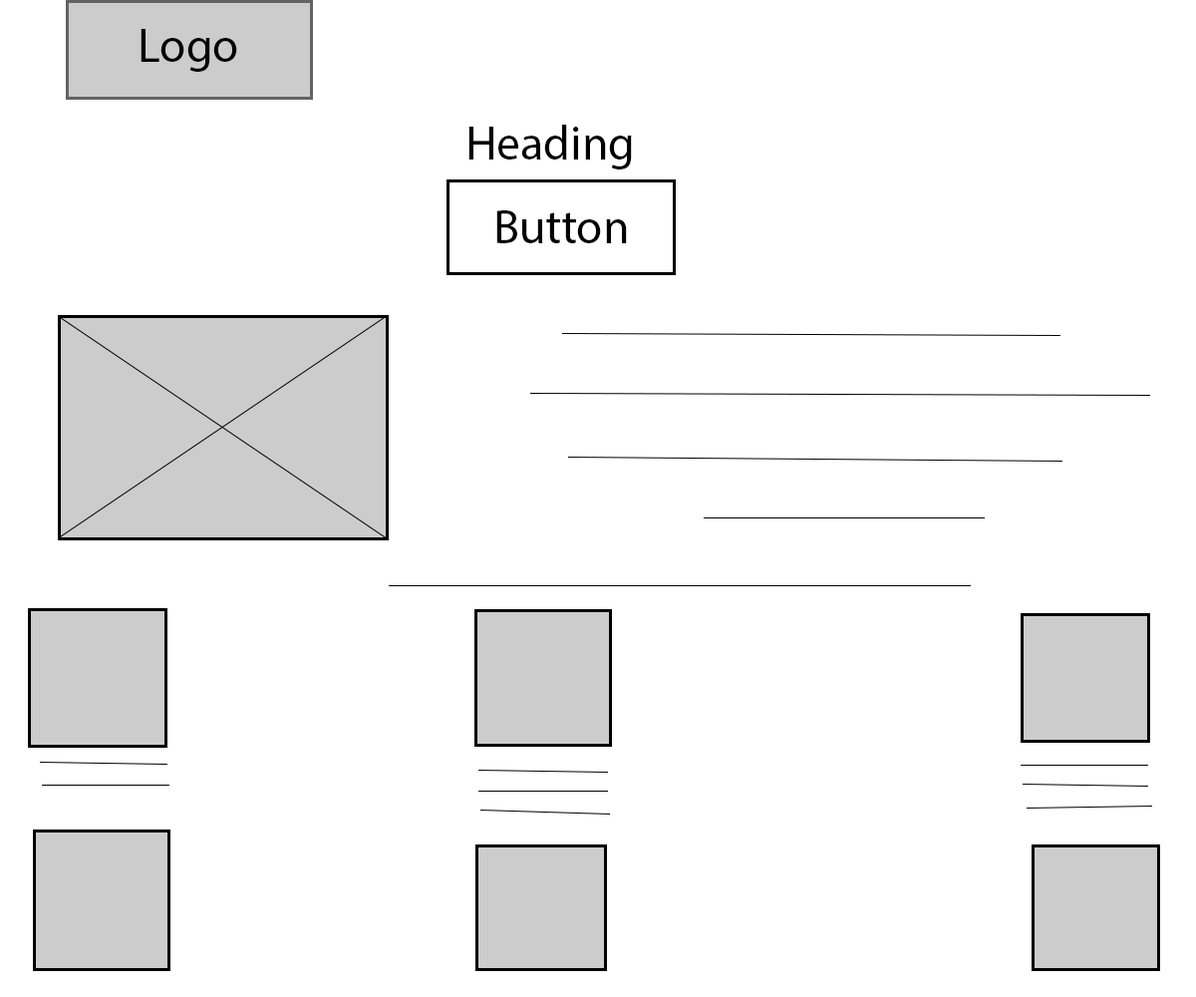
<style>
.page{position:relative;width:1196px;height:997px;background:#ffffff}
.page>*{position:absolute;margin:0}
.t1{font:47.8px "MyriadPro-Regular";color:#000000}
</style>
<div class="page">
<p class="t1" style="left:141px;top:29px;width:96px;height:43px">Logo</p>
<p class="t1" style="left:469px;top:125px;width:163px;height:44px">Heading</p>
<p class="t1" style="left:496px;top:210px;width:131px;height:33px">Button</p>
</div>
